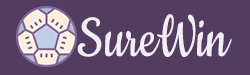
<style>
.page{position:relative;width:250px;height:75px;background:#523d61}
.page>*{position:absolute;margin:0}
.t1{font:66.8px "Cookie-Regular";color:#f2eef5;scale:0.86 1}
</style>
<div class="page">
<p class="t1" style="left:77px;top:14px;width:155px;height:43px">SureWin</p>
</div>
